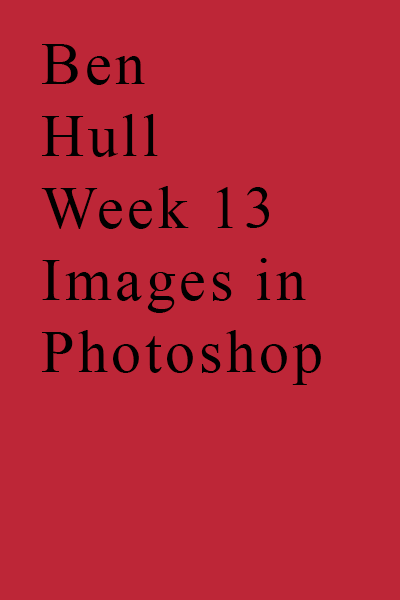
<style>
.page{position:relative;width:400px;height:600px;background:#bd2637}
.page>*{position:absolute;margin:0}
.t1{font:60px "TimesNewRomanPSMT";letter-spacing:0.06em;color:#000000}
</style>
<div class="page">
<p class="t1" style="left:41px;top:44px;width:280px;height:341px">Ben<br>Hull<br>Week 13<br>Images in <br>Photoshop</p>
</div>
